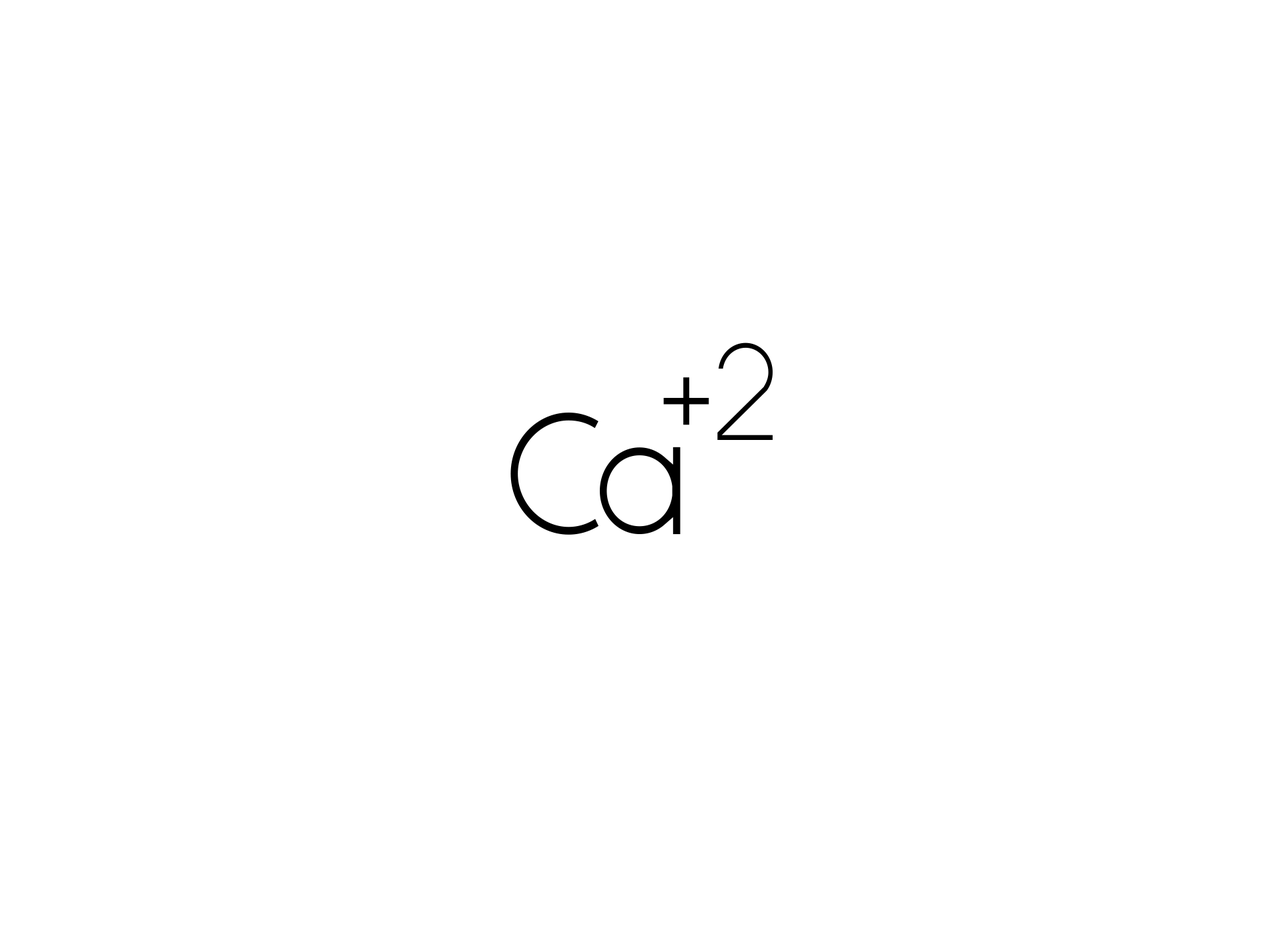
<style>
.page{position:relative;width:1261px;height:946px;background:#ffffff}
.page>*{position:absolute;margin:0}
.t1{font:138.9px "Alcubierre";color:#000000;scale:0.95 1}
.t2{font:162.1px "Alcubierre";color:#000000;scale:0.95 1}
.t3{font:173.6px "Alcubierre";color:#000000;scale:0.95 1}
</style>
<div class="page">
<p class="t1" style="left:717px;top:342px;width:56px;height:98px">2</p>
<p class="t2" style="left:663px;top:377px;width:46px;height:48px">+</p>
<p class="t3" style="left:510px;top:412px;width:171px;height:122px">Ca</p>
</div>
